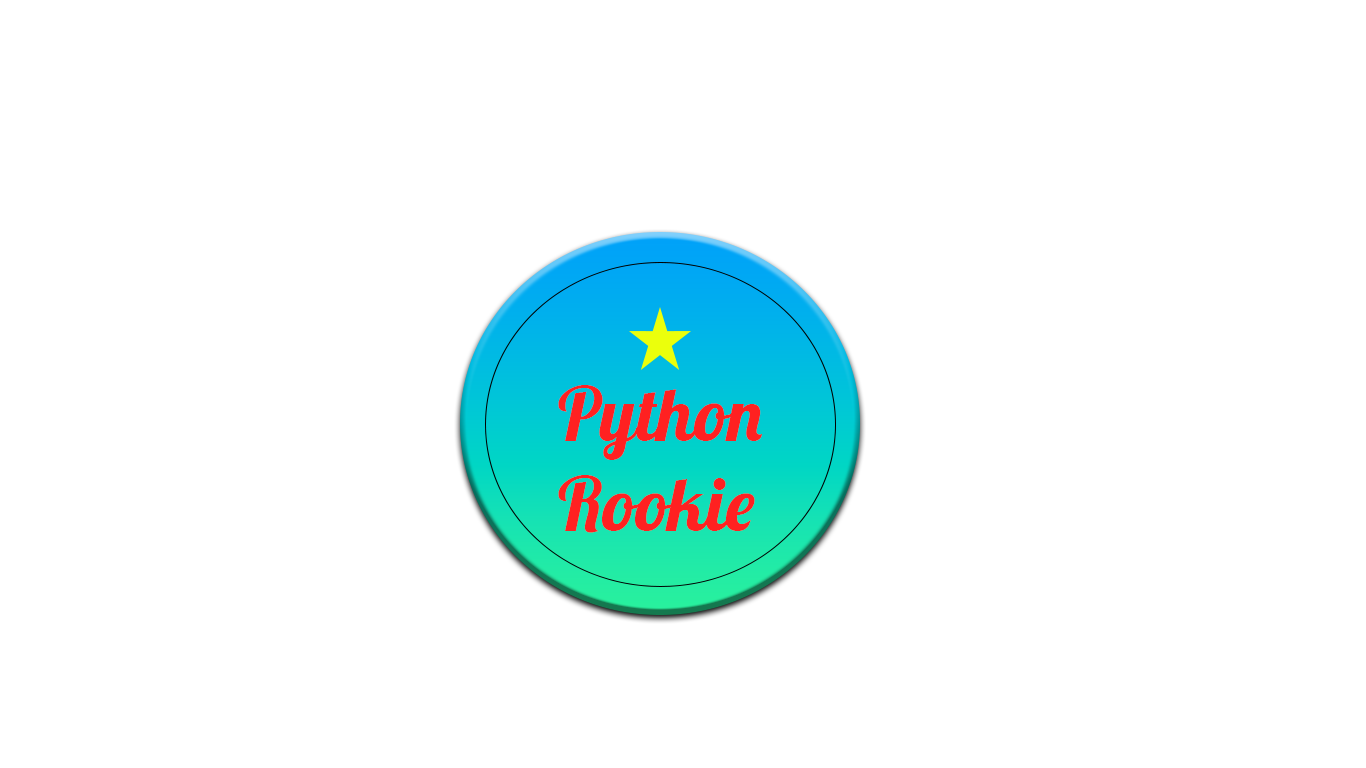
<style>
.page{position:relative;width:1366px;height:768px;background:#ffffff}
.page>*{position:absolute;margin:0}
.t1{font:75px "Lobster-Regular";color:#ff2121}
</style>
<div class="page">
<p class="t1" style="left:558px;top:385px;width:204px;height:148px">Python <br>Rookie</p>
</div>
